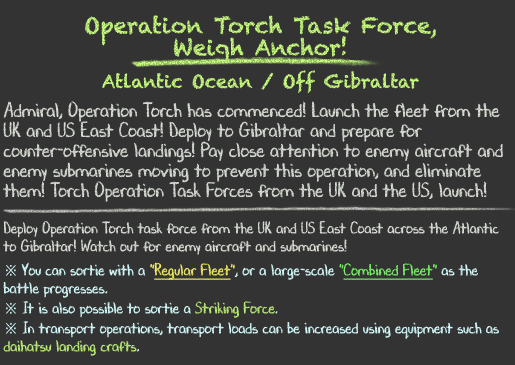
<style>
.page{position:relative;width:515px;height:365px;background:#333333}
.page>*{position:absolute;margin:0}
.t1{font:18px/36px "Chalkduster";color:#bcec77}
.t2{font:22px/22px "Chalkduster";color:#bcec77}
.t3{font:22px/36px "Chalkduster";color:#bcec77}
.t4{font:20px/20px "DJBChalkItUp";color:#d9ded6;scale:0.9 1}
.t5{font:16px/18px "DJBChalkItUp";color:#d9ded6;scale:0.9 1}
.t6{font:16px/24px "DJBChalkItUp";color:#d9ded6;scale:0.9 1}
.t7{font:16px/18px "TimesNewRomanPSMT";color:#d7feff;scale:0.9 1}
.t8{font:16px/18px "DJBChalkItUp";color:#d7feff;scale:0.9 1}
.t9{font:16px/18px "DJBChalkItUp";color:#f5ed68;scale:0.9 1}
.t10{font:16px/18px "DJBChalkItUp";color:#f5ed68;text-decoration:underline;scale:0.9 1}
.t11{font:16px/18px "DJBChalkItUp";color:#7bf26b;scale:0.9 1}
.t12{font:16px/18px "DJBChalkItUp";color:#7bf26b;text-decoration:underline;scale:0.9 1}
.t13{font:16px/20px "DJBChalkItUp";color:#d7feff;scale:0.9 1}
.t14{font:16px/20px "TimesNewRomanPSMT";color:#d7feff;scale:0.9 1}
.t15{font:16px/20px "DJBChalkItUp";color:#bdef78;scale:0.9 1}
.t16{font:16px/18px "DJBChalkItUp";color:#bdef78;scale:0.9 1}
</style>
<div class="page">
<p class="t1" style="left:85px;top:15px;width:351px;height:78px;text-align:center"><span class="t2">Operation Torch Task Force,<br></span><span class="t3">Weigh Anchor!<br></span>Atlantic Ocean / Off Gibraltar</p>
<p class="t4" style="left:3px;top:101px;width:500px;height:255px">Admiral, Operation Torch has commenced! Launch the fleet from the<br>UK and US East Coast! Deploy to Gibraltar and prepare for<br>counter-offensive landings! Pay close attention to enemy aircraft and<br>enemy submarines moving to prevent this operation, and eliminate<br>them! Torch Operation Task Forces from the UK and the US, launch!<br><br><span class="t5">Deploy Operation Torch task force from the UK and US East Coast across the Atlantic<br></span><span class="t6">to Gibraltar! Watch out for enemy aircraft and submarines!<br></span><span class="t7">※ </span><span class="t8">You can sortie with a </span><span class="t9">"</span><span class="t10">Regular Fleet</span><span class="t9">"</span><span class="t8">, or a large-scale </span><span class="t11">"</span><span class="t12">Combined Fleet</span><span class="t11">" </span><span class="t8">as the<br></span><span class="t13">battle progresses.<br></span><span class="t14">※</span><span class="t13"> It is also possible to sortie a </span><span class="t15">Striking Force</span><span class="t13">.<br></span><span class="t7">※ </span><span class="t8">In transport operations, transport loads can be increased using equipment such as<br></span><span class="t16">daihatsu landing crafts</span><span class="t8">.</span></p>
</div>
